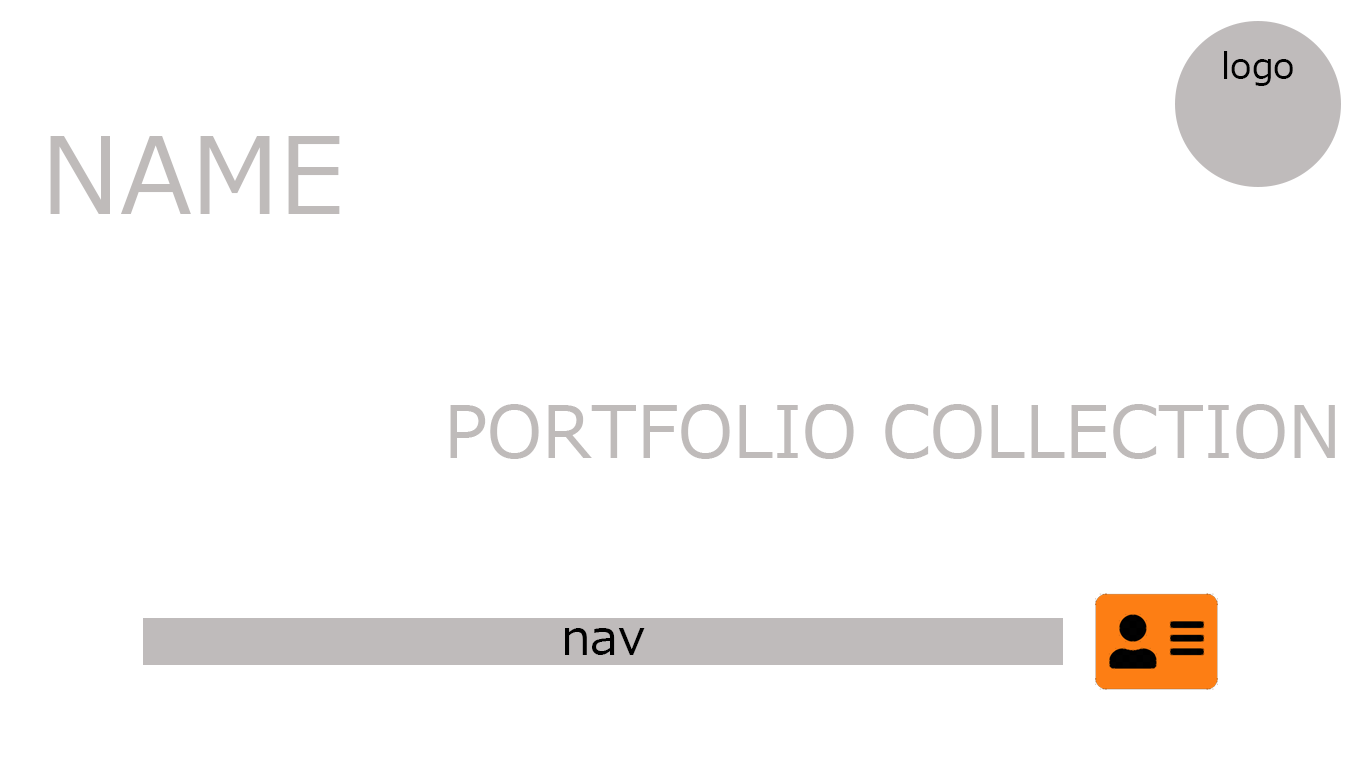
<style>
.page{position:relative;width:1366px;height:768px;background:#ffffff}
.page>*{position:absolute;margin:0}
.t1{font:105.6px "Meiryo";color:#bfbbba}
.t2{font:72px "Meiryo";color:#bfbbba}
</style>
<div class="page">
<p class="t1" style="left:50px;top:136px;width:290px;height:78px">NAME</p>
<p class="t2" style="left:450px;top:404px;width:885px;height:55px">PORTFOLIO COLLECTION</p>
</div>
